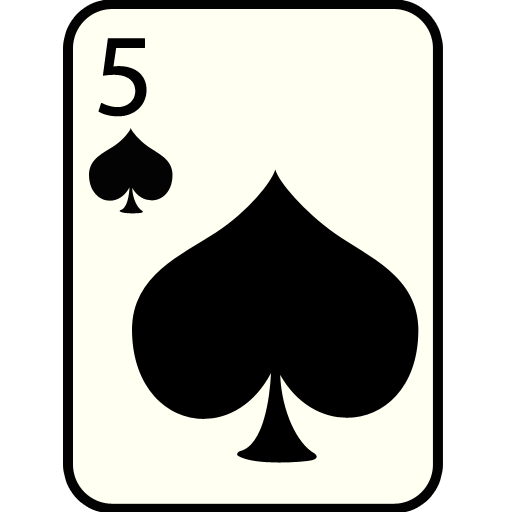
<style>
.page{position:relative;width:512px;height:512px;background:#fffff2}
.page>*{position:absolute;margin:0}
.t1{font:200px "MyriadPro-Regular";letter-spacing:-0.05em;color:#000000;font-variant:small-caps;font-weight:bold}
</style>
<div class="page">
<p class="t1" style="left:98px;top:38px;width:49px;height:79px">5</p>
</div>
